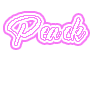
<style>
.page{position:relative;width:100px;height:100px;background:#ffffff}
.page>*{position:absolute;margin:0}
.t1{font:37.6px "NightfallDemo";letter-spacing:0.04em;color:#ffffff;scale:1.03 1}
</style>
<div class="page">
<p class="t1" style="left:8px;top:16px;width:77px;height:29px">Peack</p>
<p class="t1" style="left:8px;top:16px;width:77px;height:29px">Peack</p>
<p class="t1" style="left:8px;top:16px;width:77px;height:29px">Peack</p>
<p class="t1" style="left:8px;top:16px;width:77px;height:29px">Peack</p>
</div>
